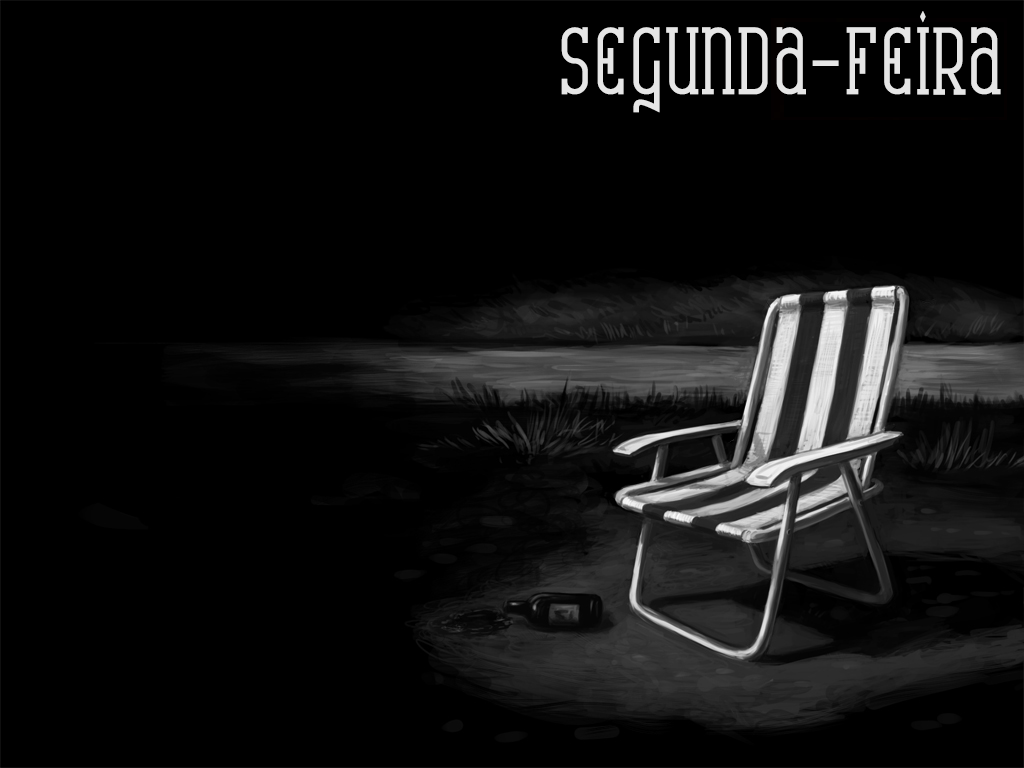
<style>
.page{position:relative;width:1024px;height:768px;background:#000000}
.page>*{position:absolute;margin:0}
.t1{font:102.7px "CatharsisRequiemBold";letter-spacing:-0.001em;color:#e6e6e6}
</style>
<div class="page">
<p class="t1" style="left:561px;top:11px;width:440px;height:102px">segunda-feira</p>
</div>
